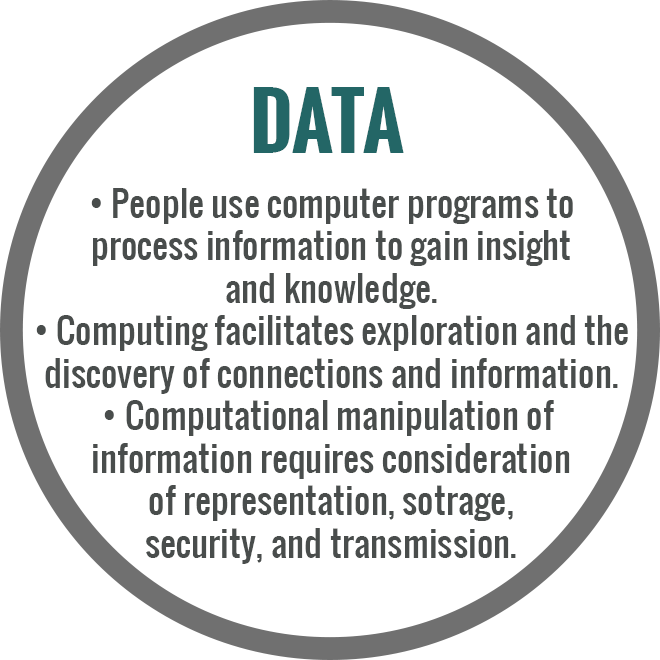
<style>
.page{position:relative;width:660px;height:660px;background:#ffffff}
.page>*{position:absolute;margin:0}
.t1{font:75px "Oswald-Bold";color:#236666}
.t2{font:35.4px "Oswald-Regular";color:#494d4c}
</style>
<div class="page">
<p class="t1" style="left:253px;top:87px;width:151px;height:66px">DATA</p>
<p class="t2" style="left:36px;top:188px;width:592px;height:376px;text-align:center">• People use computer programs to<br>process information to gain insight<br>and knowledge.<br>• Computing facilitates exploration and the<br>discovery of connections and information.<br>• Computational manipulation of <br>information requires consideration<br>of representation, sotrage,<br> security, and transmission.</p>
</div>
